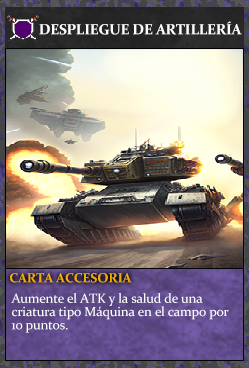
<style>
.page{position:relative;width:249px;height:368px}
.page>*{position:absolute;margin:0}
.t1{font:14.7px "Constantia-Bold";letter-spacing:-0.02em;color:#ffffff}
.t2{font:13.3px "Constantia-Bold";letter-spacing:-0.02em;color:#f2ac05}
.t3{font:13.3px/13.3px "Constantia";letter-spacing:-0.02em;color:#ffffff}
</style>
<div class="page">
<p class="t1" style="left:39px;top:21px;width:203px;height:14px">DESPLIEGUE DE ARTILLERÍA</p>
<p class="t2" style="left:10px;top:273px;width:122px;height:10px">CARTA ACCESORIA</p>
<p class="t3" style="left:11px;top:293px;width:218px;height:40px">Aumente el ATK y la salud de una <br>criatura tipo Máquina en el campo por<br>10 puntos.</p>
</div>
